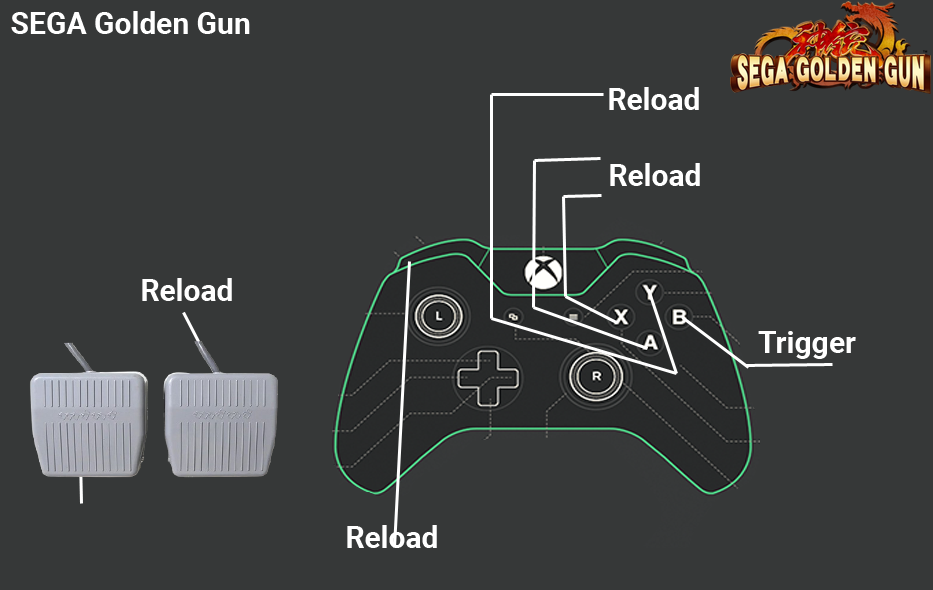
<style>
.page{position:relative;width:933px;height:590px;background:#363838}
.page>*{position:absolute;margin:0}
.t1{font:30px "Roboto-Bold";color:#ffffff}
</style>
<div class="page">
<p class="t1" style="left:11px;top:11px;width:239px;height:23px">SEGA Golden Gun</p>
<p class="t1" style="left:609px;top:87px;width:90px;height:23px">Reload</p>
<p class="t1" style="left:610px;top:163px;width:90px;height:23px">Reload</p>
<p class="t1" style="left:142px;top:278px;width:90px;height:23px">Reload</p>
<p class="t1" style="left:758px;top:331px;width:98px;height:28px">Trigger</p>
<p class="t1" style="left:347px;top:525px;width:90px;height:23px">Reload</p>
</div>
